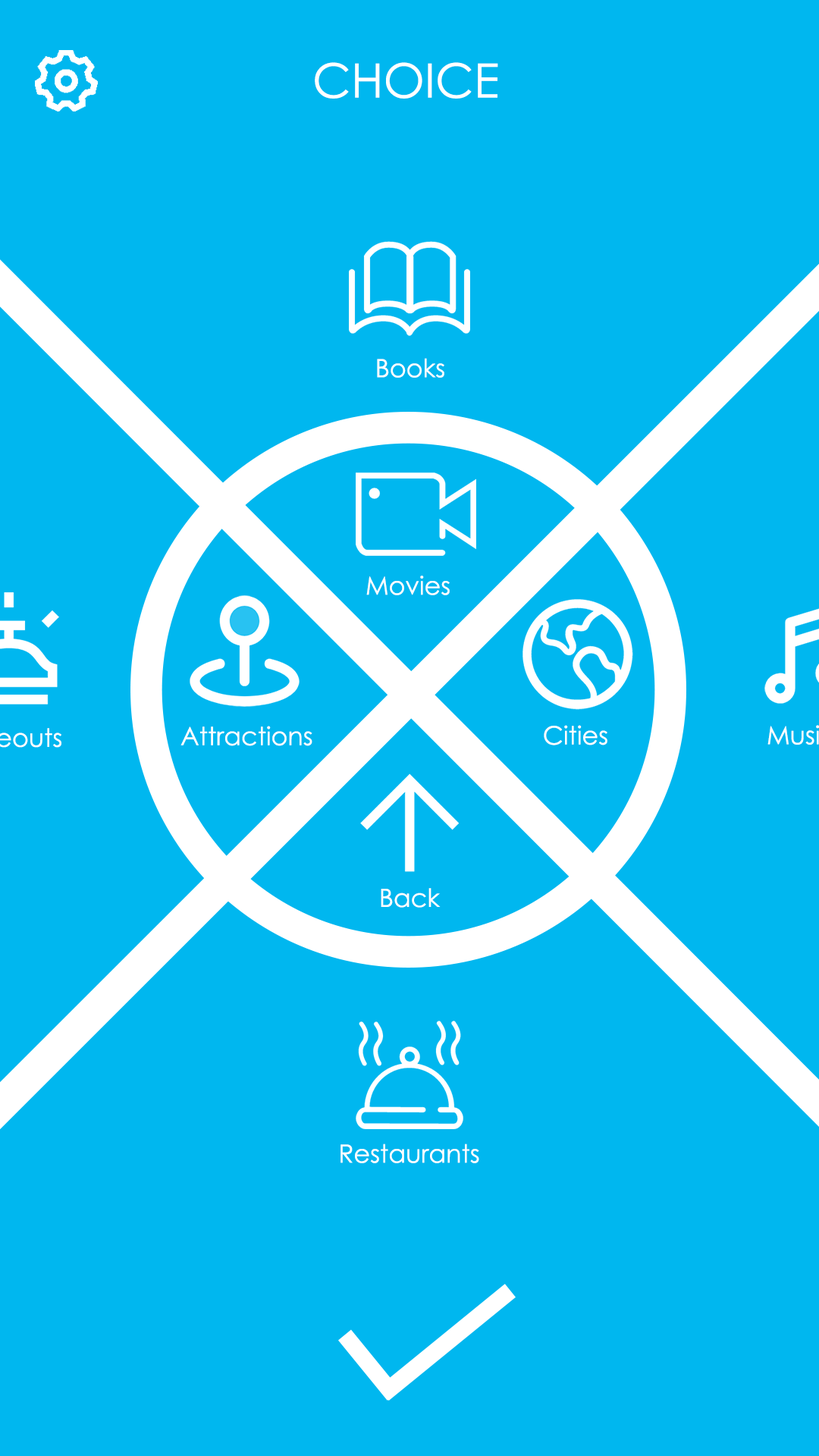
<style>
.page{position:relative;width:819px;height:1456px;background:#00b7ef}
.page>*{position:absolute;margin:0}
.t1{font:47.4px "CenturyGothic";color:#ffffff}
.t2{font:25.3px "CenturyGothic";color:#ffffff}
</style>
<div class="page">
<p class="t1" style="left:315px;top:62px;width:183px;height:37px">CHOICE</p>
<p class="t2" style="left:377px;top:358px;width:67px;height:20px">Books</p>
<p class="t2" style="left:366px;top:576px;width:84px;height:19px">Movies</p>
<p class="t2" style="left:180px;top:726px;width:132px;height:20px">Attractions</p>
<p class="t2" style="left:544px;top:725px;width:63px;height:20px">Cities</p>
<p class="t2" style="left:381px;top:888px;width:60px;height:20px">Back</p>
<p class="t2" style="left:340px;top:1144px;width:139px;height:19px">Restaurants</p>
</div>
